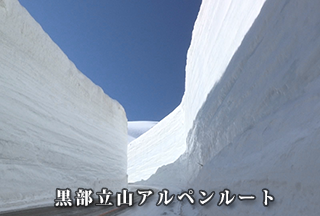
<style>
.page{position:relative;width:320px;height:216px}
.page>*{position:absolute;margin:0}
.t1{font:17px "KozMinPr6N-Heavy";letter-spacing:0.2em;color:#ffffff}
</style>
<div class="page">
<p class="t1" style="left:55px;top:189px;width:218px;height:17px">黒部立山アルペンルート</p>
</div>
